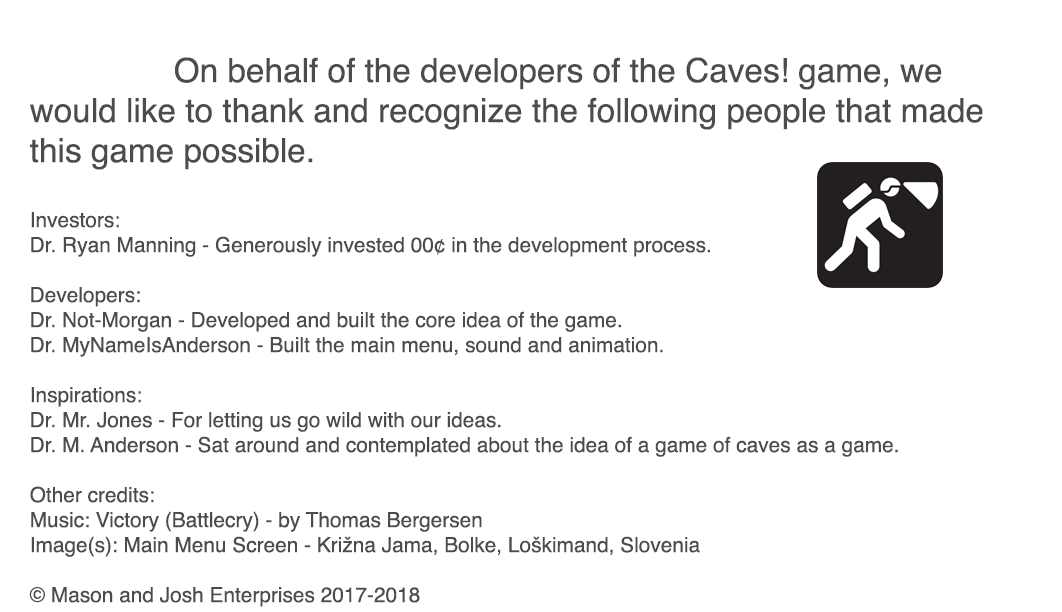
<style>
.page{position:relative;width:1062px;height:612px;background:#ffffff}
.page>*{position:absolute;margin:0}
.t1{font:20.8px "Helvetica";color:#4c4c4c}
.t2{font:33.3px "Helvetica";color:#4c4c4c}
</style>
<div class="page">
<p class="t1" style="left:29px;top:57px;width:954px;height:550px"><span class="t2">    On behalf of the developers of the Caves! game, we <br>would like to thank and recognize the following people that made <br>this game possible.<br><br></span>Investors:<br>Dr. Ryan Manning - Generously invested 00¢ in the development process.<br><br>Developers:<br>Dr. Not-Morgan - Developed and built the core idea of the game.<br>Dr. MyNameIsAnderson - Built the main menu, sound and animation.<br><br>Inspirations:<br>Dr. Mr. Jones - For letting us go wild with our ideas.<br>Dr. M. Anderson - Sat around and contemplated about the idea of a game of caves as a game.<br><br>Other credits:<br>Music: Victory (Battlecry) - by Thomas Bergersen<br>Image(s): Main Menu Screen - Križna Jama, Bolke, Loškimand, Slovenia<br><br>© Mason and Josh Enterprises 2017-2018</p>
</div>
